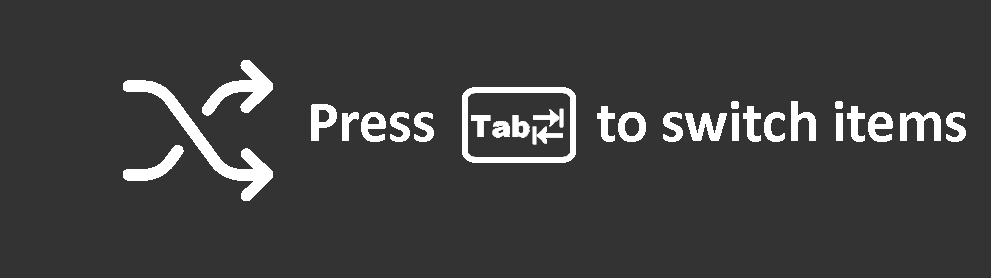
<style>
.page{position:relative;width:991px;height:278px;background:#333333}
.page>*{position:absolute;margin:0}
.t1{font:59px "Calibri-Bold";color:#ffffff}
</style>
<div class="page">
<p class="t1" style="left:311px;top:101px;width:655px;height:41px">Press            to switch items</p>
</div>
